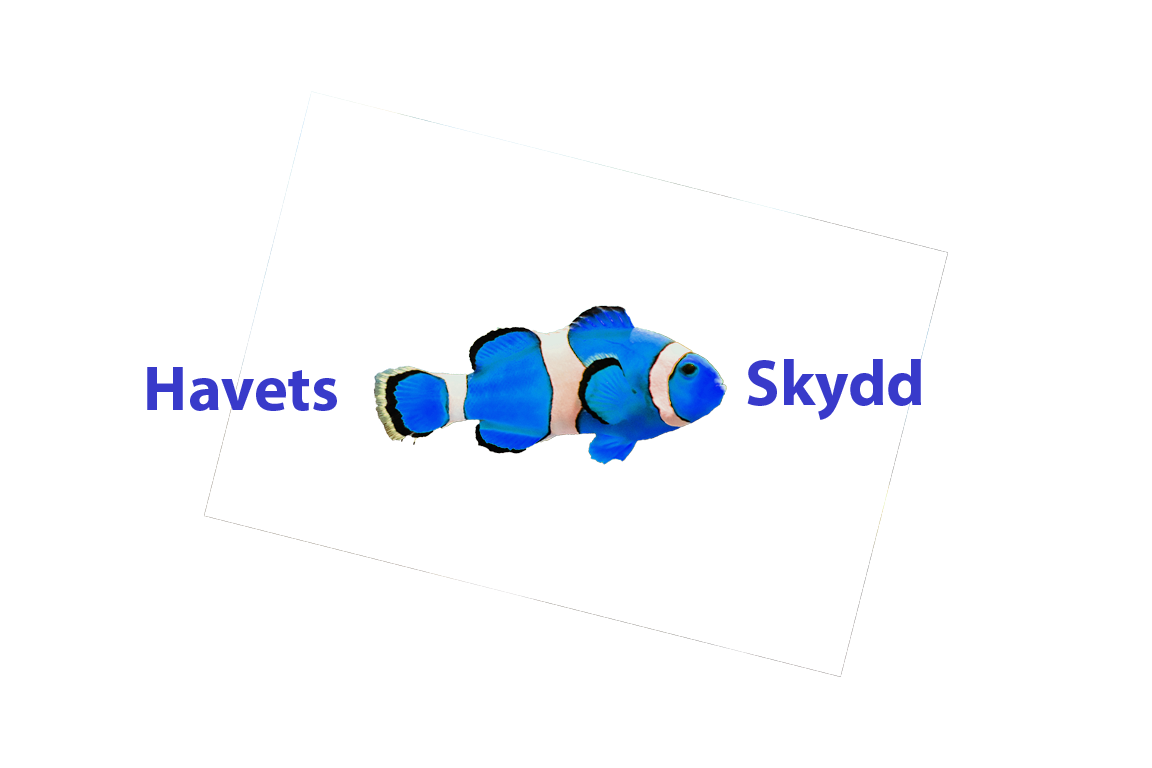
<style>
.page{position:relative;width:1152px;height:768px;background:#ffffff}
.page>*{position:absolute;margin:0}
.t1{font:64.6px "MyriadPro-Bold";color:#383aca}
.t2{font:64px "MyriadPro-Bold";color:#383aca}
</style>
<div class="page">
<p class="t1" style="left:747px;top:359px;width:174px;height:61px">Skydd</p>
<p class="t2" style="left:147px;top:367px;width:190px;height:44px">Havets</p>
</div>
